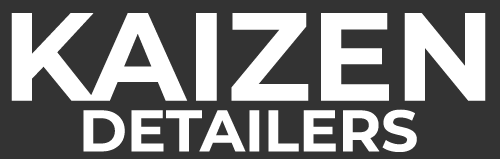
<style>
.page{position:relative;width:500px;height:159px;background:#333333}
.page>*{position:absolute;margin:0}
.t1{font:125px "Montserrat-Bold";color:#ffffff}
.t2{font:58.3px "Montserrat-Bold";color:#ffffff}
</style>
<div class="page">
<p class="t1" style="left:11px;top:13px;width:475px;height:88px">KAIZEN</p>
<p class="t2" style="left:83px;top:109px;width:334px;height:43px">DETAILERS</p>
</div>
